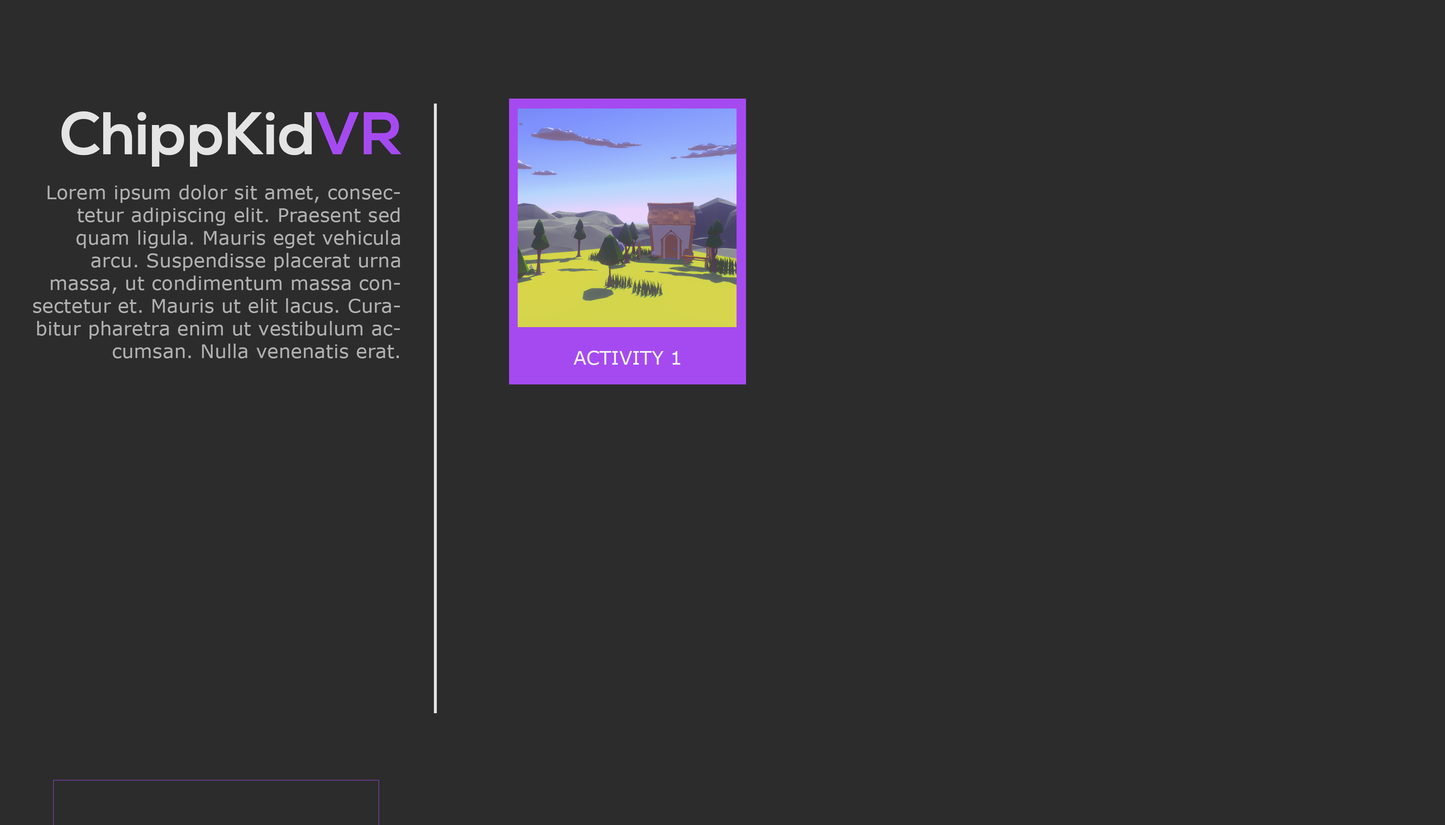
<style>
.page{position:relative;width:1445px;height:825px;background:#2c2c2c}
.page>*{position:absolute;margin:0}
.t1{font:60.2px "NexaBold";color:#e4e4e4}
.t2{font:60.2px "NexaBold";color:#a54af0}
.t3{font:18.9px "MSReferenceSansSerif";letter-spacing:0.01em;color:#b0b0b0}
.t4{font:18.9px "MSReferenceSansSerif";color:#f4f4f4}
</style>
<div class="page">
<p class="t1" style="left:61px;top:111px;width:340px;height:56px">ChippKid<span class="t2">VR</span></p>
<p class="t3" style="left:33px;top:185px;width:367px;height:174px;text-align:right">Lorem ipsum dolor sit amet, consectetur adipiscing elit. Praesent sed quam ligula. Mauris eget vehicula arcu. Suspendisse placerat urna massa, ut condimentum massa consectetur et. Mauris ut elit lacus. Curabitur pharetra enim ut vestibulum accumsan. Nulla venenatis erat.</p>
<p class="t4" style="left:573px;top:351px;width:107px;height:14px">ACTIVITY 1</p>
</div>
